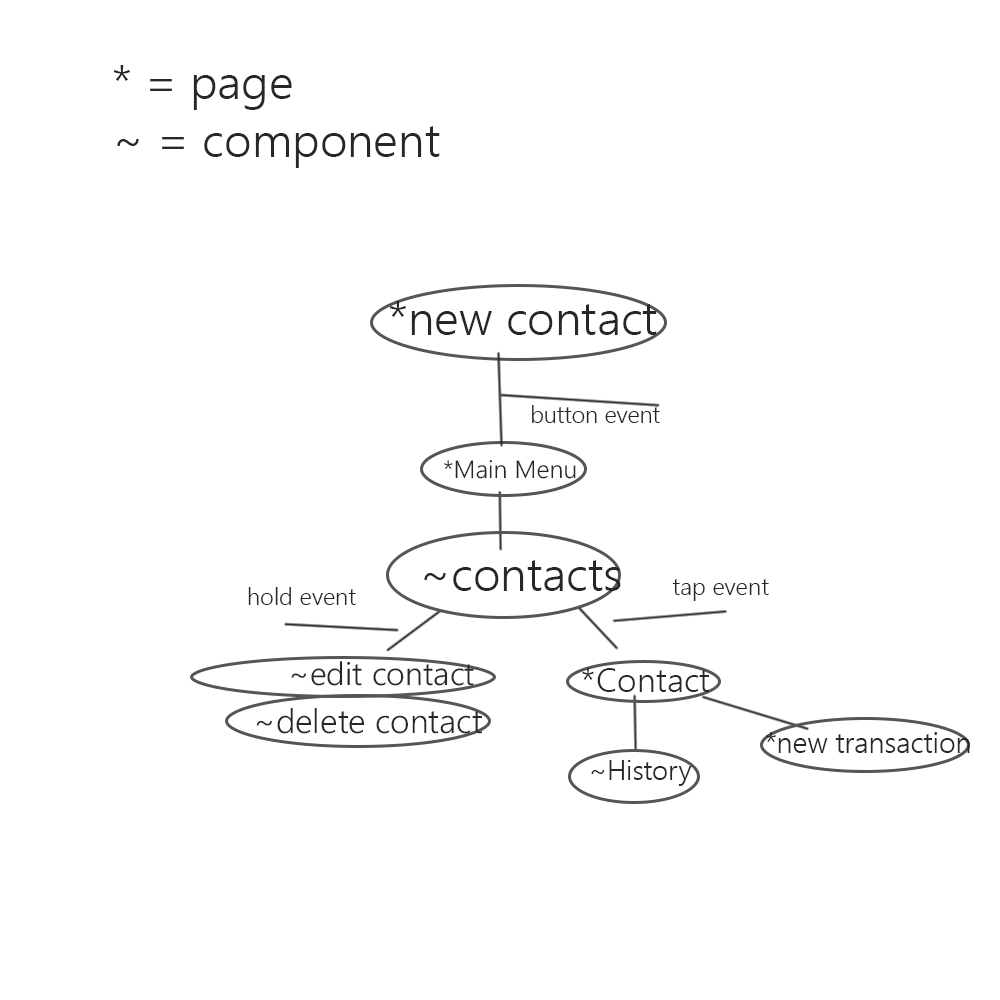
<style>
.page{position:relative;width:1000px;height:1000px;background:#ffffff}
.page>*{position:absolute;margin:0}
.t1{font:48px "SegoeUI-Semilight";color:#272727}
.t2{font:23.6px "SegoeUI-Semilight";color:#272727}
.t3{font:24.9px "SegoeUI-Semilight";color:#272727}
.t4{font:24px "SegoeUI-Semilight";color:#272727}
.t5{font:32.2px "SegoeUI-Semilight";color:#272727}
.t6{font:34.4px "SegoeUI-Semilight";color:#272727}
.t7{font:33.8px "SegoeUI-Semilight";color:#272727}
.t8{font:28.8px "SegoeUI-Semilight";color:#272727}
.t9{font:27.6px "SegoeUI-Semilight";color:#272727}
</style>
<div class="page">
<p class="t1" style="left:113px;top:65px;width:327px;height:103px">* = page<br>~ = component</p>
<p class="t1" style="left:389px;top:301px;width:268px;height:34px">*new contact</p>
<p class="t2" style="left:532px;top:405px;width:128px;height:18px">button event</p>
<p class="t3" style="left:444px;top:460px;width:132px;height:19px">*Main Menu</p>
<p class="t1" style="left:424px;top:560px;width:197px;height:31px">~contacts</p>
<p class="t4" style="left:672px;top:579px;width:97px;height:22px">tap event</p>
<p class="t4" style="left:248px;top:587px;width:108px;height:18px">hold event</p>
<p class="t5" style="left:291px;top:661px;width:183px;height:25px">~edit contact</p>
<p class="t6" style="left:582px;top:668px;width:127px;height:24px">*Contact</p>
<p class="t7" style="left:256px;top:708px;width:226px;height:26px">~delete contact</p>
<p class="t8" style="left:766px;top:732px;width:204px;height:21px">*new transaction</p>
<p class="t9" style="left:591px;top:760px;width:101px;height:26px">~History</p>
</div>
